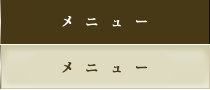
<style>
.page{position:relative;width:210px;height:90px;background:#473816}
.page>*{position:absolute;margin:0}
.t1{font:12px "KozMinPro-Bold";color:#fefdfc;font-weight:bold}
.t2{font:12px "KozMinPro-Bold";color:#473816;font-weight:bold}
</style>
<div class="page">
<p class="t1" style="left:62px;top:16px;width:86px;height:11px">メ　ニ　ュ　ー</p>
<p class="t2" style="left:62px;top:62px;width:86px;height:11px">メ　ニ　ュ　ー</p>
</div>
